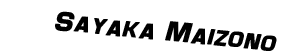
<style>
.page{position:relative;width:283px;height:56px;background:#ffffff}
.page>*{position:absolute;margin:0}
.t1{font:28px "Maximus";color:#000000;font-weight:bold;font-style:italic}
</style>
<div class="page">
<p class="t1" style="left:55px;top:11px;width:222px;height:40px;rotate:6deg">Sayaka Maizono</p>
</div>
